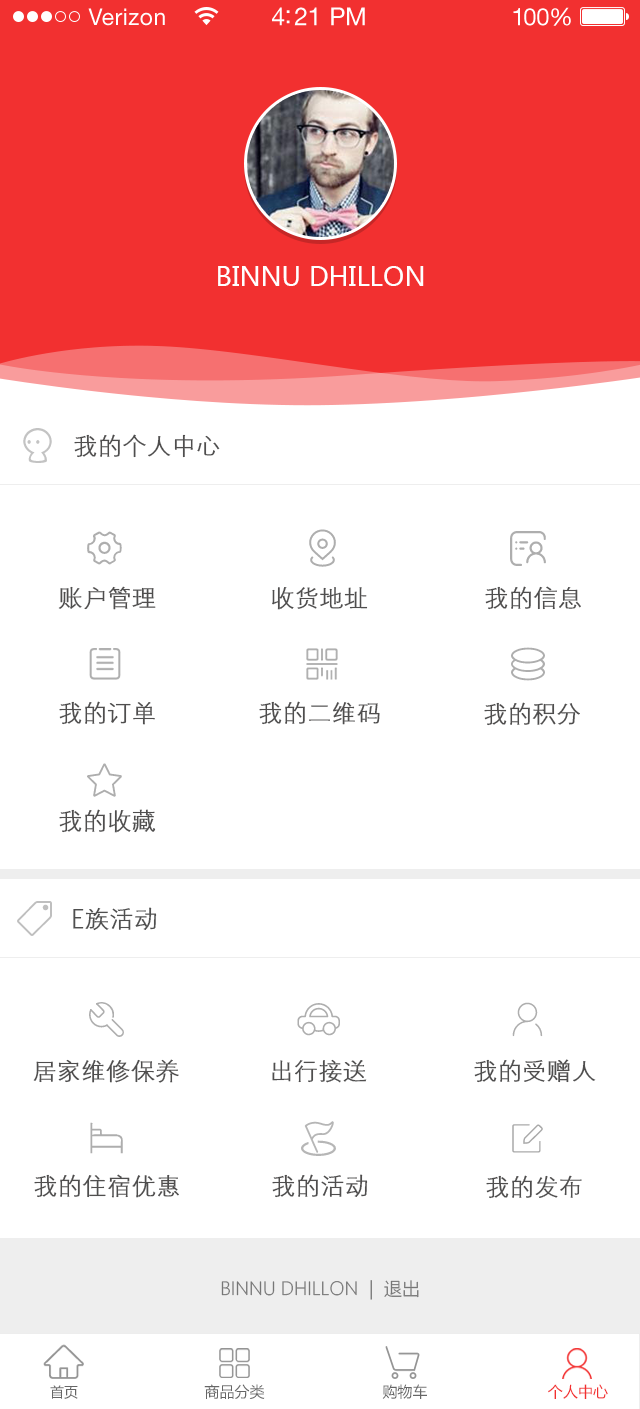
<style>
.page{position:relative;width:640px;height:1409px;background:#ffffff}
.page>*{position:absolute;margin:0}
.t1{font:22.9px "HelveticaNeueLTStd-Roman";letter-spacing:0.02em;color:#ffffff}
.t2{font:24.9px "HelveticaNeueLTStd-Roman";letter-spacing:-0.02em;color:#ffffff}
.t3{font:23.9px "HelveticaNeueLTStd-Roman";letter-spacing:-0.02em;color:#ffffff}
.t4{font:26px "MicrosoftYaHei";color:#ffffff}
.t5{font:24px "DenshanCSEG-Light-GB";color:#4f4e4e;font-weight:bold}
.t6{font:24px "DenshanCSEG-Light-GB";color:#4f4f4f;font-weight:bold}
.t7{font:18px "MicrosoftYaHeiLight";color:#767676}
.t8{font:13.9px "MicrosoftYaHei";color:#666666}
.t9{font:14.9px "MicrosoftYaHei";color:#666666}
.t10{font:14.9px "MicrosoftYaHei";color:#f23030}
</style>
<div class="page">
<p class="t1" style="left:88px;top:8px;width:77px;height:18px">Verizon</p>
<p class="t2" style="left:272px;top:7px;width:93px;height:19px">4:21 PM</p>
<p class="t3" style="left:513px;top:7px;width:58px;height:19px">100%</p>
<p class="t4" style="left:218px;top:266px;width:206px;height:20px">BINNU DHILLON</p>
<p class="t5" style="left:74px;top:434px;width:146px;height:24px">我的个人中心</p>
<p class="t5" style="left:58px;top:586px;width:98px;height:24px">账户管理</p>
<p class="t5" style="left:272px;top:587px;width:96px;height:23px">收货地址</p>
<p class="t5" style="left:485px;top:586px;width:96px;height:24px">我的信息</p>
<p class="t5" style="left:59px;top:701px;width:96px;height:24px">我的订单</p>
<p class="t5" style="left:259px;top:701px;width:121px;height:24px">我的二维码</p>
<p class="t5" style="left:484px;top:702px;width:96px;height:24px">我的积分</p>
<p class="t5" style="left:59px;top:809px;width:97px;height:24px">我的收藏</p>
<p class="t6" style="left:73px;top:907px;width:84px;height:24px">E族活动</p>
<p class="t5" style="left:33px;top:1059px;width:146px;height:24px">居家维修保养</p>
<p class="t5" style="left:272px;top:1059px;width:95px;height:24px">出行接送</p>
<p class="t5" style="left:474px;top:1059px;width:122px;height:24px">我的受赠人</p>
<p class="t5" style="left:34px;top:1174px;width:145px;height:24px">我的住宿优惠</p>
<p class="t5" style="left:272px;top:1174px;width:96px;height:24px">我的活动</p>
<p class="t5" style="left:486px;top:1175px;width:96px;height:24px">我的发布</p>
<p class="t7" style="left:221px;top:1280px;width:198px;height:20px">BINNU DHILLON  |  退出</p>
<p class="t8" style="left:50px;top:1385px;width:28px;height:14px">首页</p>
<p class="t9" style="left:204px;top:1384px;width:61px;height:15px">商品分类</p>
<p class="t9" style="left:382px;top:1384px;width:45px;height:15px">购物车</p>
<p class="t10" style="left:548px;top:1384px;width:60px;height:15px">个人中心</p>
</div>
